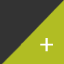
<style>
.page{position:relative;width:64px;height:64px;background:#333333}
.page>*{position:absolute;margin:0}
.t1{font:24px "EuphemiaCAS";letter-spacing:-0.05em;color:#ffffff;font-weight:bold}
</style>
<div class="page">
<p class="t1" style="left:40px;top:38px;width:13px;height:14px">+</p>
</div>
